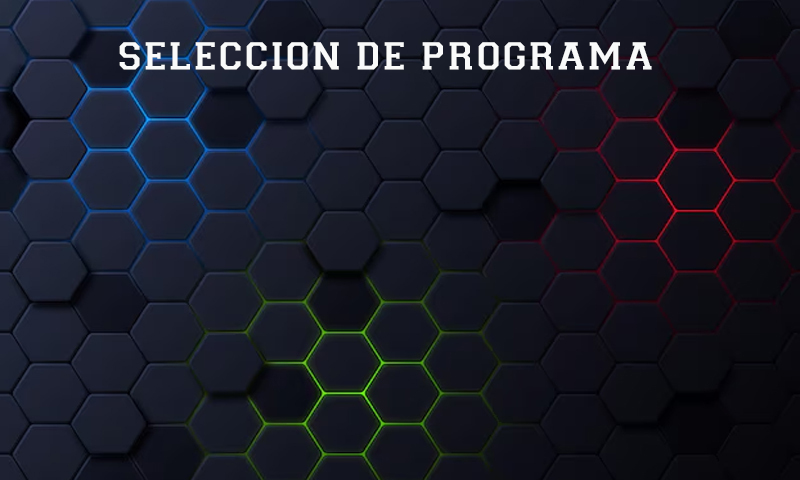
<style>
.page{position:relative;width:800px;height:480px}
.page>*{position:absolute;margin:0}
.t1{font:45.8px "CollegiateInsideFLF";color:#f9fafa}
</style>
<div class="page">
<p class="t1" style="left:119px;top:42px;width:533px;height:28px">seleccion de programa</p>
</div>
